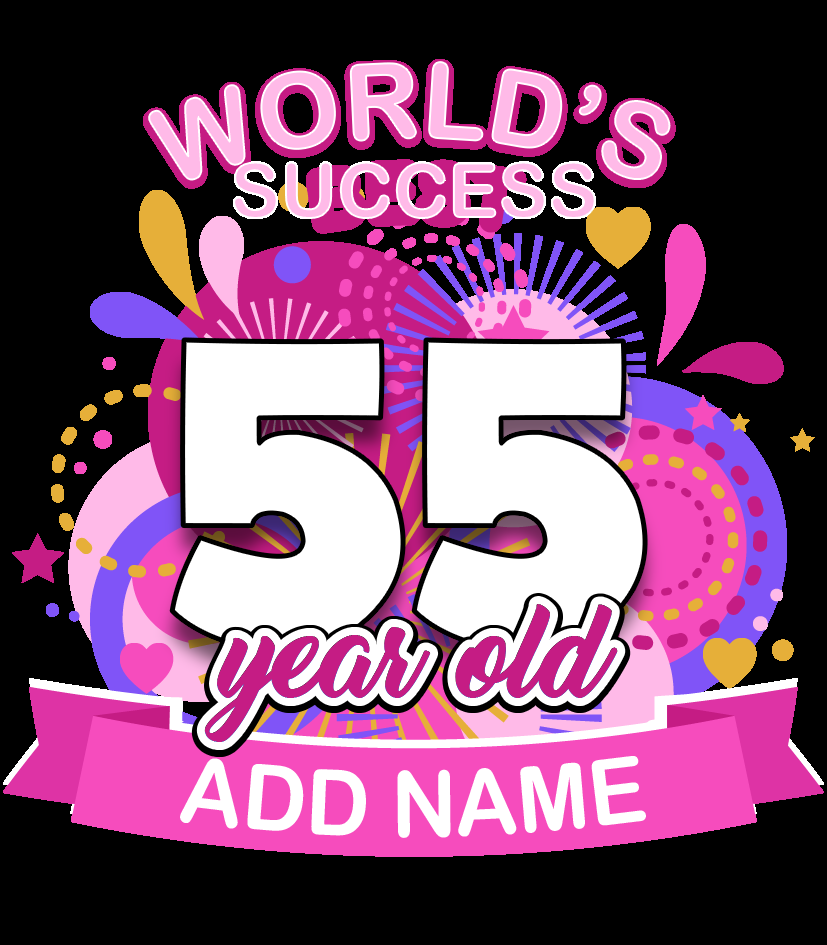
<style>
.page{position:relative;width:827px;height:945px;background:#000000}
.page>*{position:absolute;margin:0}
.t1{font:104.2px "ArialRoundedMTBold";color:#ffbae8;text-transform:uppercase}
.t2{font:75px "ArialRoundedMTBold";color:#ffbae8;text-transform:uppercase}
.t3{font:231.5px "SpaceComics";color:#ffffff;scale:0.95 1}
.t4{font:104.3px "ThinkingOfBetty";color:#c51c84;scale:0.95 1}
.t5{font:91.7px "ArialRoundedMTBold";color:#ffffff;text-transform:uppercase;scale:0.95 1}
</style>
<div class="page">
<p class="t1" style="left:149px;top:65px;width:521px;height:118px">world’s</p>
<p class="t1" style="left:149px;top:62px;width:521px;height:118px">world’s</p>
<p class="t2" style="left:234px;top:162px;width:365px;height:56px">SUCCESS</p>
<p class="t3" style="left:172px;top:340px;width:474px;height:312px">55</p>
<p class="t4" style="left:204px;top:606px;width:414px;height:138px">year old</p>
<p class="t4" style="left:204px;top:604px;width:414px;height:138px">year old</p>
<p class="t5" style="left:180px;top:756px;width:466px;height:82px">ADD NAME</p>
</div>
